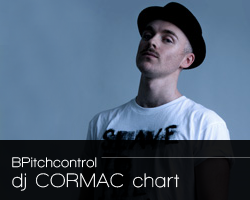
<style>
.page{position:relative;width:250px;height:200px}
.page>*{position:absolute;margin:0}
.t1{font:19.8px/20px "WalkwaySemiBold";letter-spacing:0.04em;color:#ffffff}
.t2{font:14px/26.9px "WalkwaySemiBold";letter-spacing:0.04em;color:#ffffff;text-transform:uppercase}
.t3{font:14px/26.9px "WalkwaySemiBold";letter-spacing:0.04em;color:#ffffff}
</style>
<div class="page">
<p class="t1" style="left:12px;top:157px;width:168px;height:34px"><span class="t2">bp</span><span class="t3">itchcontrol <br></span>dj CORMAC chart</p>
</div>
